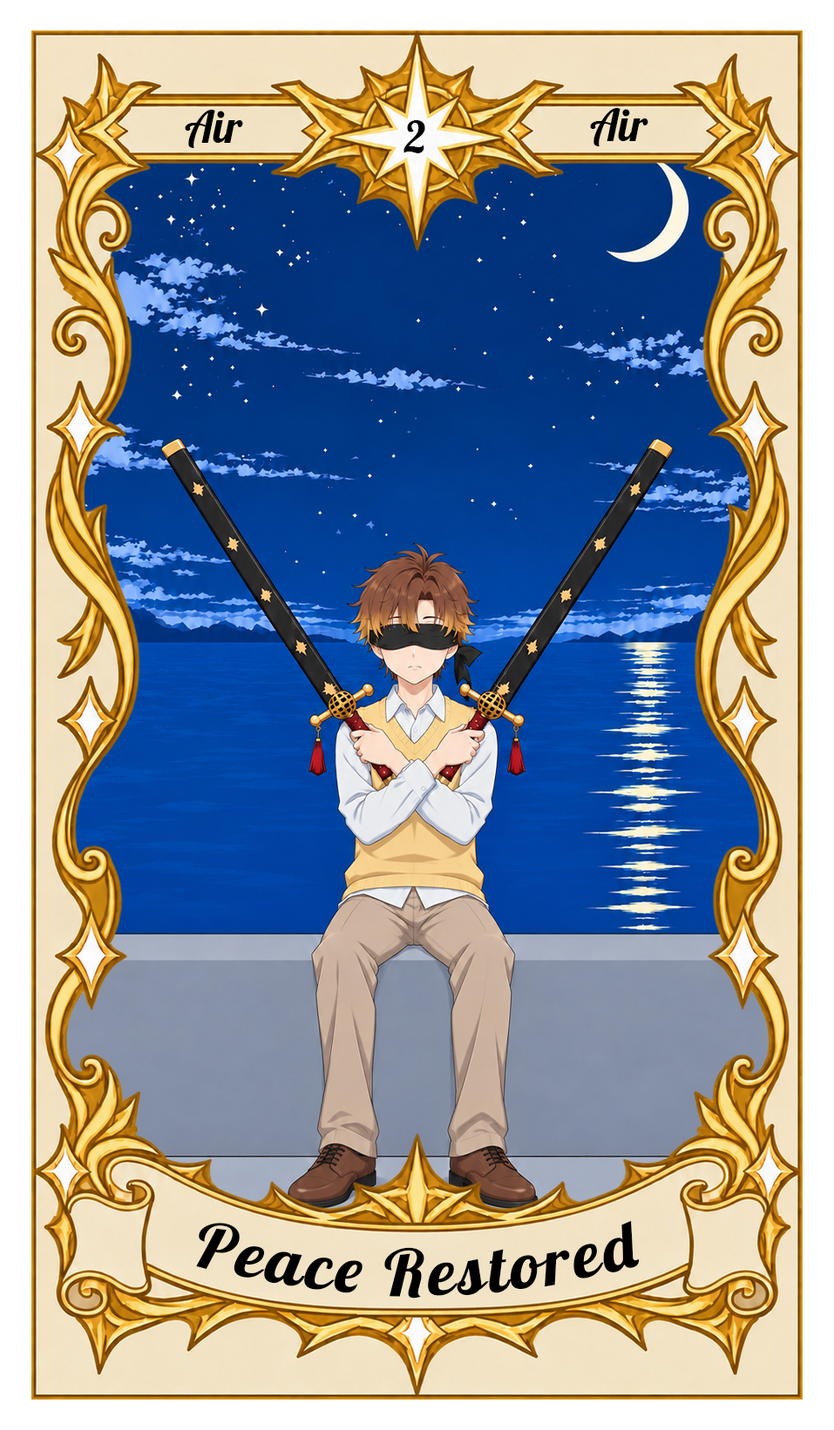
<style>
.page{position:relative;width:834px;height:1430px}
.page>*{position:absolute;margin:0}
.t1{font:43.6px "Lobster-Regular";color:#000000}
.t2{font:65.3px "Lobster-Regular";letter-spacing:0.05em;color:#000000}
</style>
<div class="page">
<p class="t1" style="left:185px;top:110px;width:58px;height:38px">Air</p>
<p class="t1" style="left:590px;top:108px;width:58px;height:38px">Air</p>
<p class="t1" style="left:403px;top:120px;width:22px;height:33px">2</p>
<p class="t2" style="left:196px;top:1220px;width:443px;height:79px">Peace Restored</p>
</div>
